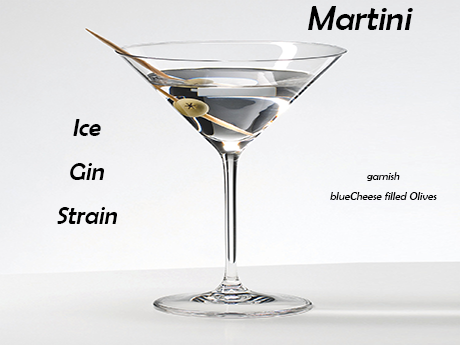
<style>
.page{position:relative;width:460px;height:345px}
.page>*{position:absolute;margin:0}
.t1{font:35.1px "BerlinSansFB-Reg";color:#000000;font-style:italic}
.t2{font:25.1px "BerlinSansFB-Reg";color:#000000;font-style:italic}
.t3{font:11.1px "BerlinSansFB-Reg";color:#000000;font-style:italic}
</style>
<div class="page">
<p class="t1" style="left:308px;top:6px;width:105px;height:24px">Martini</p>
<p class="t2" style="left:57px;top:119px;width:60px;height:105px;text-align:center">Ice<br>Gin<br>Strain</p>
<p class="t3" style="left:330px;top:172px;width:107px;height:28px;text-align:center">garnish<br>blueCheese filled Olives</p>
</div>
